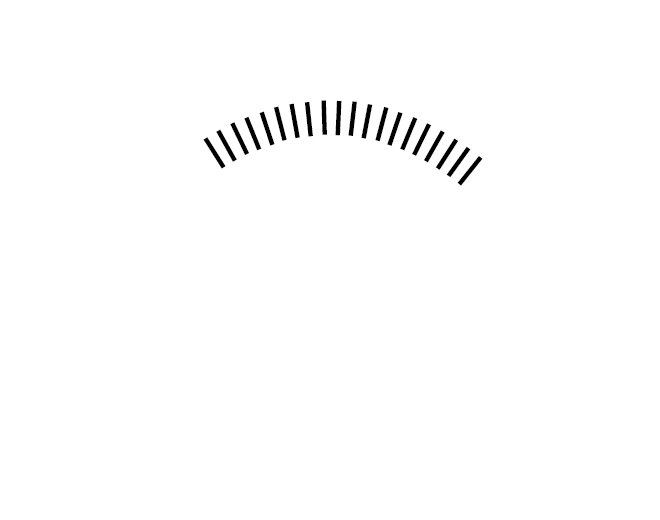
<style>
.page{position:relative;width:660px;height:520px;background:#ffffff}
.page>*{position:absolute;margin:0}
.t1{font:48px "ArialMT";color:#000000}
</style>
<div class="page">
<p class="t1" style="left:203px;top:100px;width:280px;height:86px">IIIIIIIIIIIIIIIIIIII</p>
</div>
